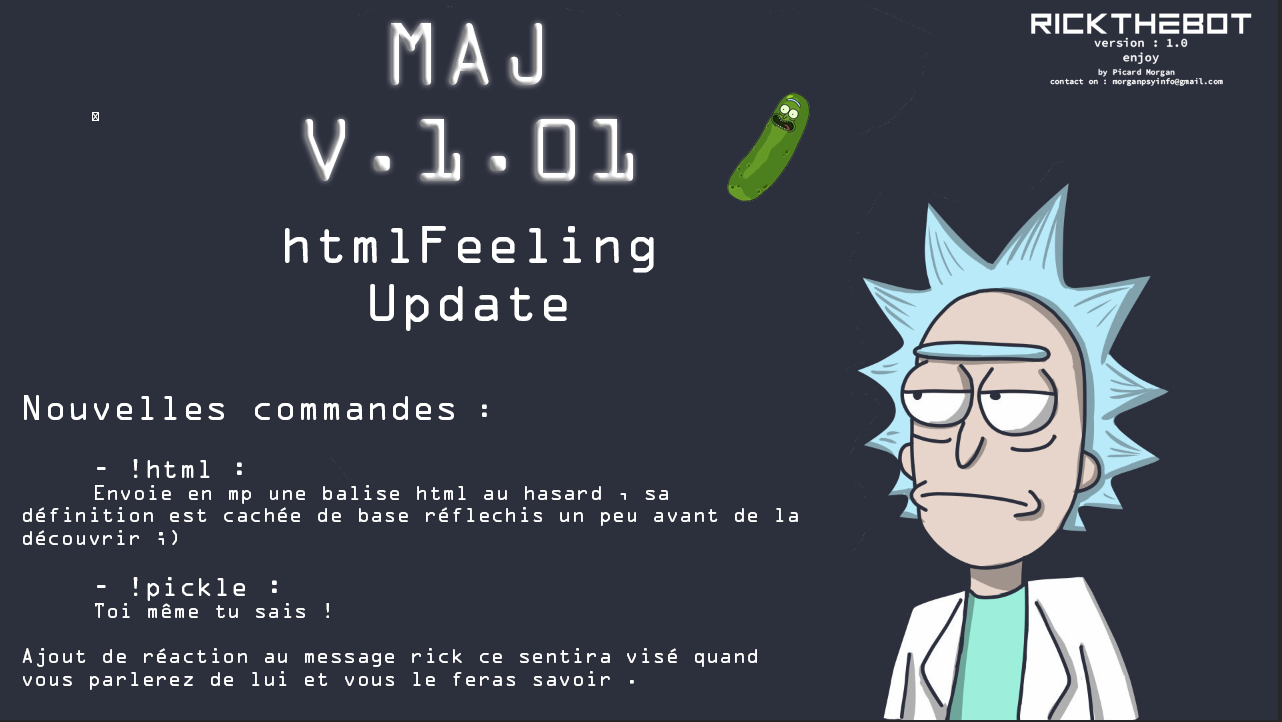
<style>
.page{position:relative;width:1282px;height:722px;background:#2c2f3c}
.page>*{position:absolute;margin:0}
.t1{font:80px "OCRAStd"}
.t2{font:12px "MyriadPro-Regular";color:#ffffff}
.t3{font:48px "OCRAStd";color:#ffffff}
.t4{font:18.7px "OCRAStd";color:#ffffff}
.t5{font:32px "OCRAStd";color:#ffffff}
.t6{font:24px "OCRAStd";color:#ffffff}
</style>
<div class="page">
<p class="t1" style="left:305px;top:23px;width:328px;height:158px;text-align:center">MAJ <br>V.1.01</p>
<p class="t2" style="left:92px;top:112px;width:7px;height:9px">😀</p>
<p class="t3" style="left:285px;top:226px;width:369px;height:105px;text-align:center">htmlFeeling<br>Update</p>
<p class="t4" style="left:22px;top:395px;width:776px;height:295px"><span class="t5">Nouvelles commandes</span><span class="t6"> :<br><br>  - !html :<br></span>  Envoie en mp une balise html au hasard , sa     définition est cachée de base réflechis un peu avant de la découvrir ;)  <br><br>  <span class="t6">- !pickle :<br></span>  Toi même tu sais ! <br><br>Ajout de réaction au message rick ce sentira visé quand vous parlerez de lui et vous le feras savoir .</p>
</div>
